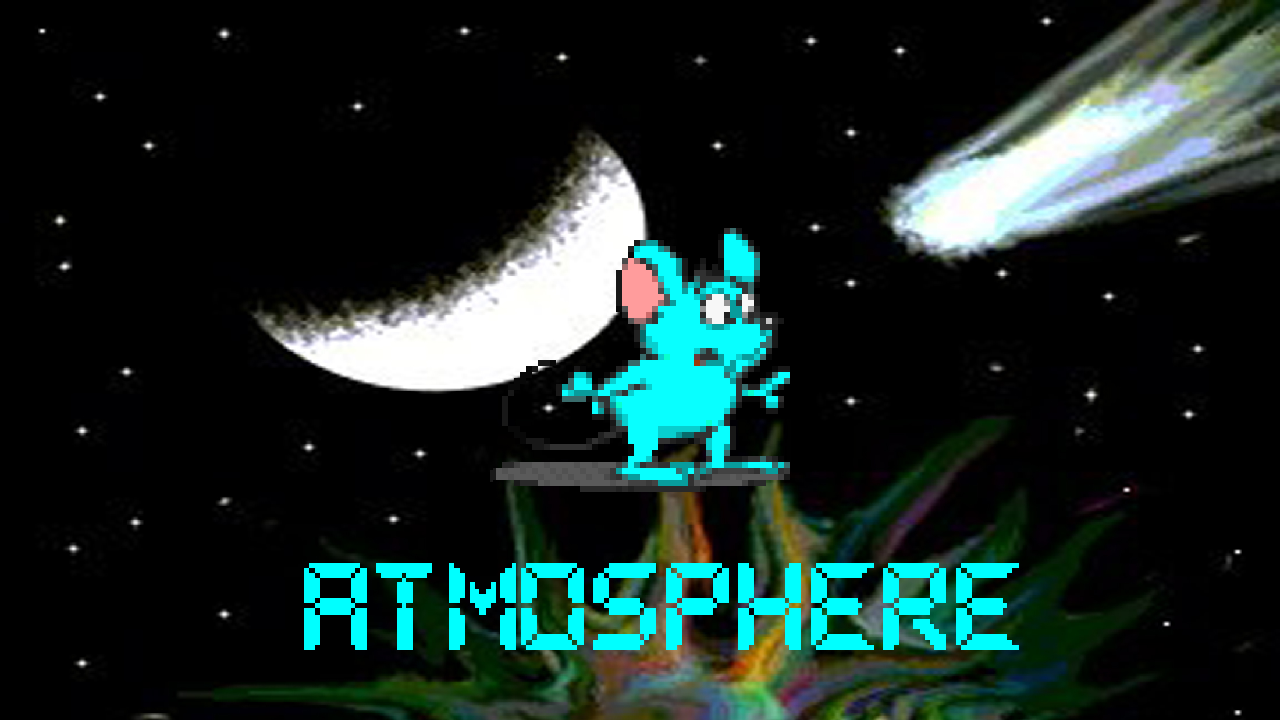
<style>
.page{position:relative;width:1280px;height:720px;background:#000000}
.page>*{position:absolute;margin:0}
.t1{font:103px "Pixel LCD-7";color:#00ffff}
</style>
<div class="page">
<p class="t1" style="left:304px;top:563px;width:715px;height:87px">Atmosphere</p>
</div>
